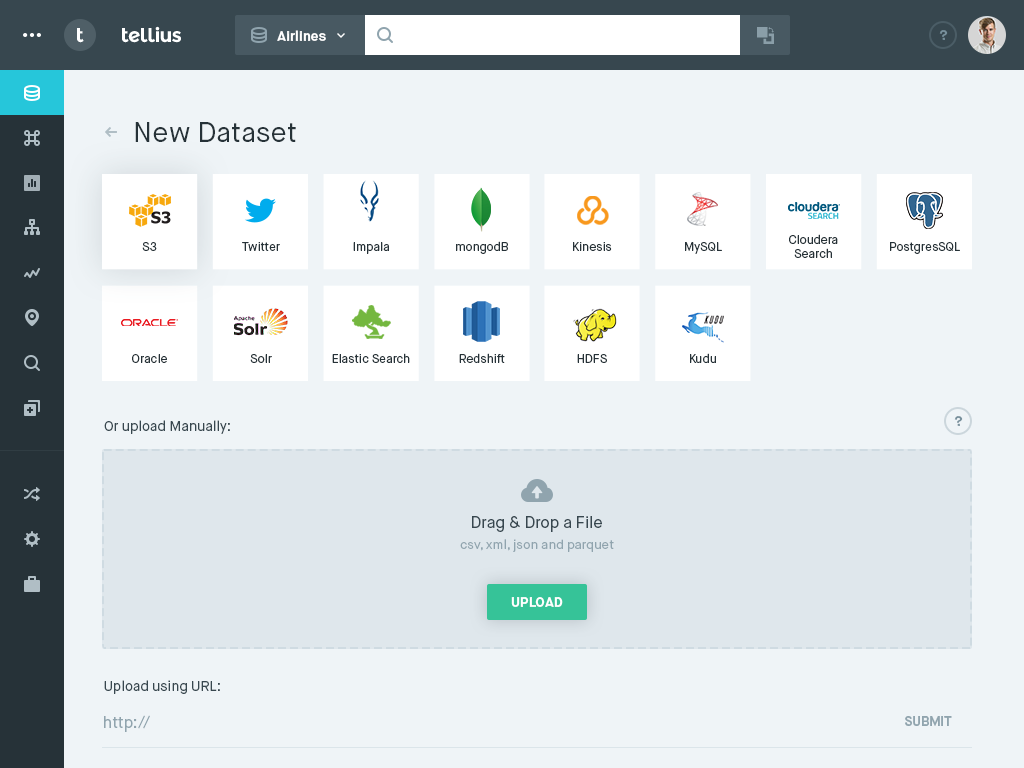
<style>
.page{position:relative;width:1024px;height:768px;background:#eff4f7}
.page>*{position:absolute;margin:0}
.t1{font:20px "MontserratAlternates-Bold";letter-spacing:-0.04em;color:#ffffff}
.t2{font:14px "MaisonNeue-Bold";color:#ffffff}
.t3{font:14px "MaisonNeue-Bold";color:#78909c}
.t4{font:28px "MaisonNeue-Book";color:#263238}
.t5{font:12px "MaisonNeue-Book";color:#263238}
.t6{font:14px "MaisonNeue-Book";color:#37474f}
.t7{font:16px "MaisonNeue-Book";color:#37474f}
.t8{font:13px "MaisonNeue-Book";color:#90a4ae}
.t9{font:14px "MaisonNeue-Bold";color:#ffffff;text-transform:uppercase}
.t10{font:16px "MaisonNeue-Book";color:#90a4ae}
.t11{font:13px "MaisonNeue-Bold";color:#90a4ae;text-transform:uppercase}
</style>
<div class="page">
<p class="t1" style="left:77px;top:28px;width:7px;height:15px">t</p>
<p class="t1" style="left:122px;top:26px;width:59px;height:17px">tellius</p>
<p class="t2" style="left:277px;top:30px;width:49px;height:11px">Airlines</p>
<p class="t3" style="left:939px;top:30px;width:9px;height:10px">?</p>
<p class="t4" style="left:135px;top:122px;width:161px;height:20px">New Dataset</p>
<p class="t5" style="left:142px;top:242px;width:15px;height:9px">S3</p>
<p class="t5" style="left:242px;top:242px;width:38px;height:9px">Twitter</p>
<p class="t5" style="left:353px;top:242px;width:36px;height:12px">Impala</p>
<p class="t5" style="left:456px;top:241px;width:52px;height:13px">mongodB</p>
<p class="t5" style="left:573px;top:242px;width:39px;height:9px">Kinesis</p>
<p class="t5" style="left:685px;top:242px;width:37px;height:12px">MySQL</p>
<p class="t5" style="left:789px;top:234px;width:49px;height:24px;text-align:center">Cloudera<br>Search</p>
<p class="t5" style="left:890px;top:242px;width:70px;height:12px">PostgresSQL</p>
<p class="t5" style="left:332px;top:353px;width:78px;height:10px">Elastic Search</p>
<p class="t5" style="left:459px;top:353px;width:46px;height:10px">Redshift</p>
<p class="t5" style="left:690px;top:353px;width:26px;height:10px">Kudu</p>
<p class="t5" style="left:132px;top:354px;width:35px;height:9px">Oracle</p>
<p class="t5" style="left:250px;top:354px;width:22px;height:9px">Solr</p>
<p class="t5" style="left:577px;top:354px;width:30px;height:9px">HDFS</p>
<p class="t6" style="left:104px;top:420px;width:126px;height:14px">Or upload Manually:</p>
<p class="t3" style="left:954px;top:416px;width:9px;height:10px">?</p>
<p class="t7" style="left:472px;top:516px;width:130px;height:16px">Drag &amp; Drop a File</p>
<p class="t8" style="left:460px;top:539px;width:154px;height:13px">csv, xml, json and parquet</p>
<p class="t9" style="left:511px;top:597px;width:52px;height:10px">Upload</p>
<p class="t6" style="left:104px;top:680px;width:116px;height:14px">Upload using URL:</p>
<p class="t10" style="left:104px;top:715px;width:46px;height:17px">http://</p>
<p class="t11" style="left:905px;top:716px;width:47px;height:10px">Submit</p>
</div>
